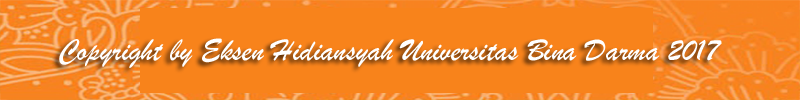
<style>
.page{position:relative;width:800px;height:100px;background:#f8831b}
.page>*{position:absolute;margin:0}
.t1{font:32px "BrushScriptMT";color:#ffffff}
</style>
<div class="page">
<p class="t1" style="left:59px;top:38px;width:663px;height:30px">Copyright by Eksen Hidiansyah Universitas Bina Darma 2017</p>
</div>
